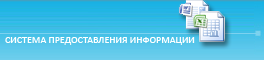
<style>
.page{position:relative;width:264px;height:60px}
.page>*{position:absolute;margin:0}
.t1{font:10px "Calibri";color:#ffffff}
</style>
<div class="page">
<p class="t1" style="left:5px;top:37px;width:190px;height:8px">СИСТЕМА ПРЕДОСТАВЛЕНИЯ ИНФОРМАЦИИ</p>
</div>
